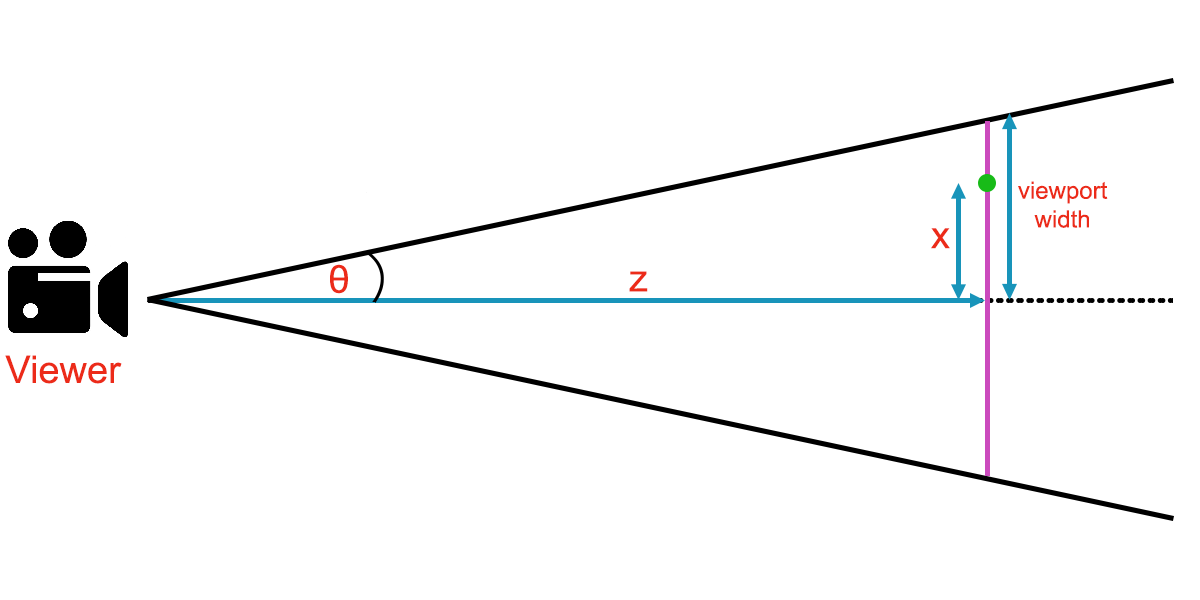
<style>
.page{position:relative;width:1200px;height:600px;background:#ffffff}
.page>*{position:absolute;margin:0}
.t1{font:24px "ArialMT";color:#ec2b19}
.t2{font:38px "ArialMT";color:#ec2b19}
</style>
<div class="page">
<p class="t1" style="left:1018px;top:181px;width:90px;height:47px;text-align:center">viewport<br>width</p>
<p class="t2" style="left:931px;top:228px;width:19px;height:21px">x</p>
<p class="t2" style="left:330px;top:264px;width:18px;height:30px">θ</p>
<p class="t2" style="left:629px;top:271px;width:19px;height:21px">z</p>
<p class="t2" style="left:5px;top:355px;width:117px;height:29px">Viewer</p>
</div>
